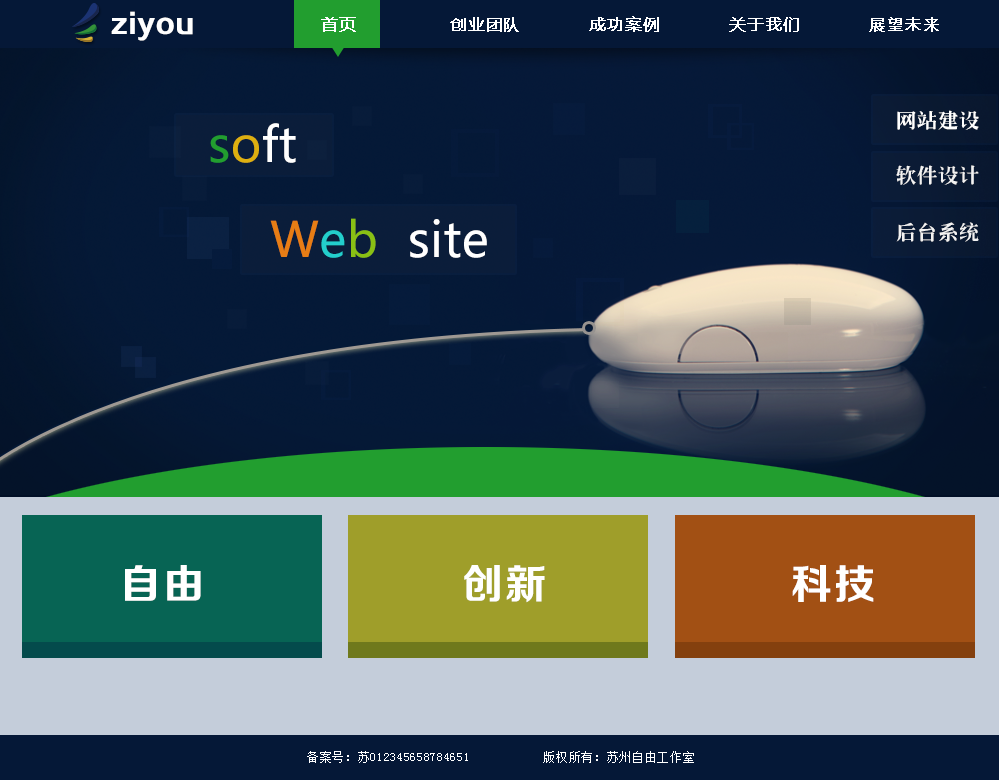
<style>
.page{position:relative;width:999px;height:780px}
.page>*{position:absolute;margin:0}
.t1{font:26px "FZZCHJW--GB1-0";letter-spacing:0.01em;color:#ffffff;font-weight:bold}
.t2{font:16px "MicrosoftYaHei";letter-spacing:0.05em;color:#ffffff;font-weight:bold}
.t3{font:20px "CTLaoSongSJ";letter-spacing:0.05em;color:#ffffff}
.t4{font:48px "MicrosoftYaHei";letter-spacing:0.01em;color:#ffffff}
.t5{font:48px "MicrosoftYaHei";letter-spacing:0.01em;color:#229e2f}
.t6{font:48px "MicrosoftYaHei";letter-spacing:0.01em;color:#deb010}
.t7{font:48px "MicrosoftYaHei";letter-spacing:0.01em;color:#e77d15}
.t8{font:48px "MicrosoftYaHei";letter-spacing:0.01em;color:#23cecc}
.t9{font:48px "MicrosoftYaHei";letter-spacing:0.01em;color:#89c014}
.t10{font:41px "FZZCHJW--GB1-0";letter-spacing:0.055em;color:#ffffff}
.t11{font:12px "SimSun";letter-spacing:0.055em;color:#ffffff}
</style>
<div class="page">
<p class="t1" style="left:111px;top:11px;width:82px;height:30px">ziyou</p>
<p class="t2" style="left:321px;top:16px;width:618px;height:16px">首页              创业团队          成功案例          关于我们          展望未来</p>
<p class="t3" style="left:897px;top:110px;width:82px;height:20px">网站建设</p>
<p class="t4" style="left:210px;top:123px;width:86px;height:40px"><span class="t5">s</span><span class="t6">o</span>ft</p>
<p class="t3" style="left:896px;top:165px;width:83px;height:20px">软件设计</p>
<p class="t4" style="left:270px;top:218px;width:217px;height:40px"><span class="t7">W</span><span class="t8">e</span><span class="t9">b  </span>site</p>
<p class="t3" style="left:896px;top:222px;width:83px;height:20px">后台系统</p>
<p class="t10" style="left:125px;top:565px;width:76px;height:36px">自由</p>
<p class="t10" style="left:464px;top:565px;width:81px;height:38px">创新</p>
<p class="t10" style="left:792px;top:565px;width:82px;height:37px">科技</p>
<p class="t11" style="left:307px;top:751px;width:387px;height:12px">备案号：苏012345658784651           版权所有：苏州自由工作室</p>
</div>
